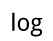
<style>
.page{position:relative;width:53px;height:41px;background:#ffffff}
.page>*{position:absolute;margin:0}
.t1{font:23.7px "DroidSans";color:#000000}
</style>
<div class="page">
<p class="t1" style="left:12px;top:12px;width:31px;height:25px">log</p>
</div>
